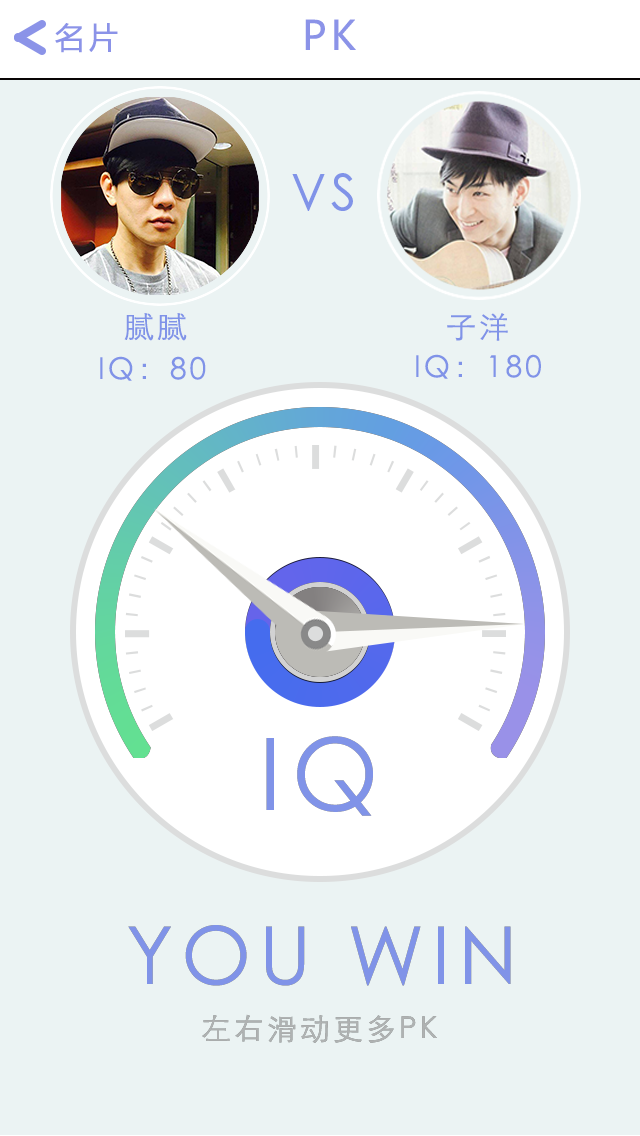
<style>
.page{position:relative;width:640px;height:1136px;background:#ebf3f3}
.page>*{position:absolute;margin:0}
.t1{font:30px "MicrosoftYaHei";letter-spacing:0.1em;color:#8b93e8}
.t2{font:40px "MicrosoftYaHei";letter-spacing:0.1em;color:#8b93e8}
.t3{font:50px "STXihei";letter-spacing:0.1em;color:#8093e8}
.t4{font:30px "STXihei";letter-spacing:0.1em;color:#8093e8}
.t5{font:100px "STXihei";letter-spacing:0.1em;color:#8093e8}
.t6{font:80px "STXihei";letter-spacing:0.1em;color:#8093e8}
.t7{font:30px "STXihei";letter-spacing:0.1em;color:#afb2b2}
</style>
<div class="page">
<p class="t1" style="left:55px;top:23px;width:63px;height:30px">名片</p>
<p class="t2" style="left:305px;top:19px;width:51px;height:31px">PK</p>
<p class="t3" style="left:292px;top:173px;width:61px;height:38px">VS</p>
<p class="t4" style="left:124px;top:313px;width:63px;height:28px">腻腻</p>
<p class="t4" style="left:447px;top:313px;width:61px;height:28px">子洋</p>
<p class="t4" style="left:100px;top:356px;width:106px;height:25px">IQ：80</p>
<p class="t4" style="left:416px;top:354px;width:125px;height:25px">IQ：180</p>
<p class="t5" style="left:266px;top:736px;width:107px;height:80px">IQ</p>
<p class="t6" style="left:128px;top:925px;width:383px;height:61px">YOU WIN</p>
<p class="t7" style="left:202px;top:1014px;width:235px;height:29px">左右滑动更多PK</p>
</div>
